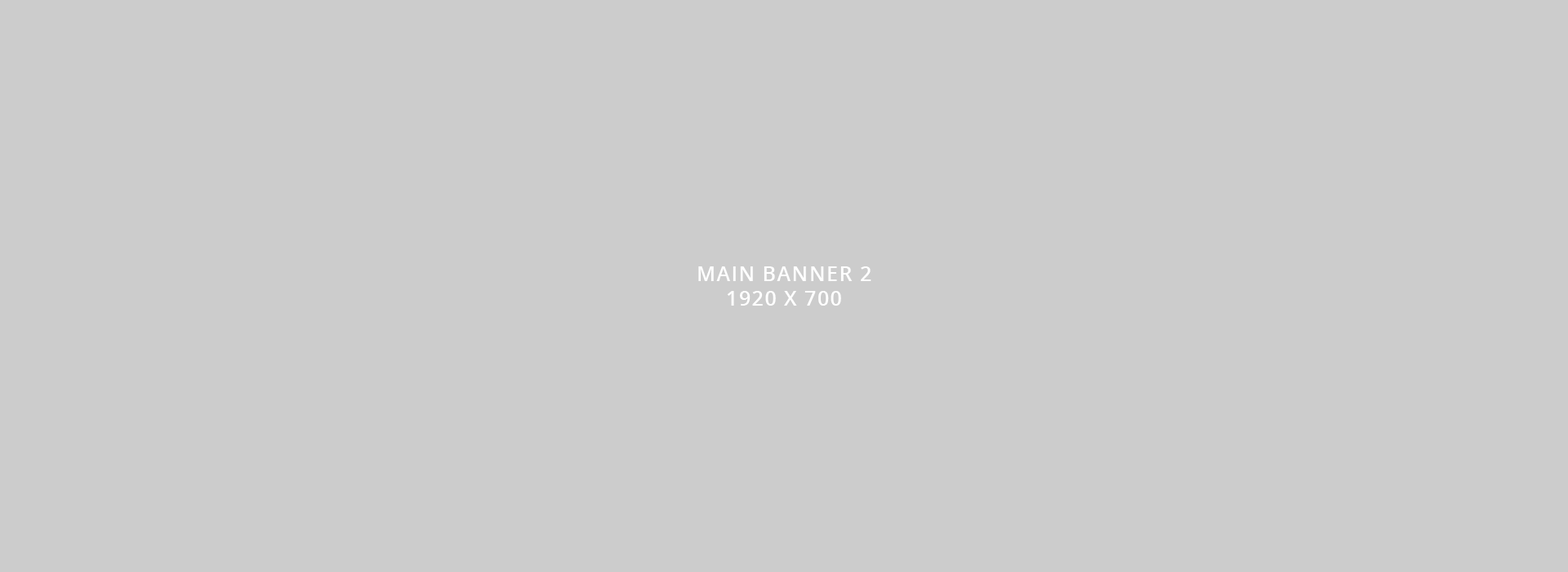
<style>
.page{position:relative;width:1568px;height:572px;background:#cccccc}
.page>*{position:absolute;margin:0}
.t1{font:20.4px "OpenSans-Semibold";letter-spacing:0.06em;color:#ffffff;text-transform:uppercase}
</style>
<div class="page">
<p class="t1" style="left:698px;top:266px;width:173px;height:39px;text-align:center">Main banner 2<br>1920 X 700</p>
</div>
